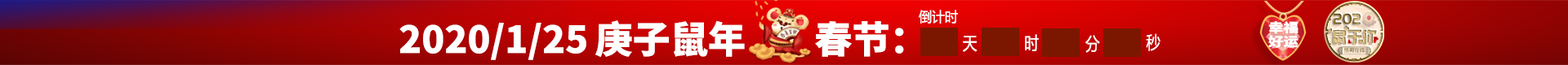
<style>
.page{position:relative;width:1568px;height:65px}
.page>*{position:absolute;margin:0}
.t1{font:13.9px "MicrosoftYaHei";color:#ffffff;scale:0.94 1}
.t2{font:15.9px "PangMenZhengDao";text-transform:uppercase;scale:0.86 1}
.t3{font:37.3px "SourceHanSansCN-Heavy";color:#ffffff}
.t4{font:12.6px/14.1px "SourceHanSansCN-Heavy";color:#ffffff;scale:1.2 1}
.t5{font:19.6px "PangMenZhengDao";text-transform:uppercase;scale:0.82 1}
.t6{font:17.6px "MicrosoftYaHei";color:#ffffff;scale:0.8 1}
.t7{font:6.2px "PangMenZhengDao";color:#998457;text-transform:uppercase;scale:0.9 1}
</style>
<div class="page">
<p class="t1" style="left:919px;top:10px;width:39px;height:14px">倒计时</p>
<p class="t2" style="left:1334px;top:13px;width:36px;height:11px">2020</p>
<p class="t3" style="left:399px;top:20px;width:505px;height:40px">2020/1/25 庚子鼠年        春节：</p>
<p class="t4" style="left:1268px;top:21px;width:30px;height:27px;text-align:center">幸福<br>好运</p>
<p class="t5" style="left:1333px;top:29px;width:44px;height:15px">鼠于你</p>
<p class="t6" style="left:963px;top:36px;width:15px;height:16px">天</p>
<p class="t6" style="left:1025px;top:34px;width:14px;height:17px">时</p>
<p class="t6" style="left:1085px;top:35px;width:15px;height:18px">分</p>
<p class="t6" style="left:1146px;top:33px;width:14px;height:18px">秒</p>
<p class="t7" style="left:1344px;top:48px;width:21px;height:5px">乐哥在线</p>
</div>
